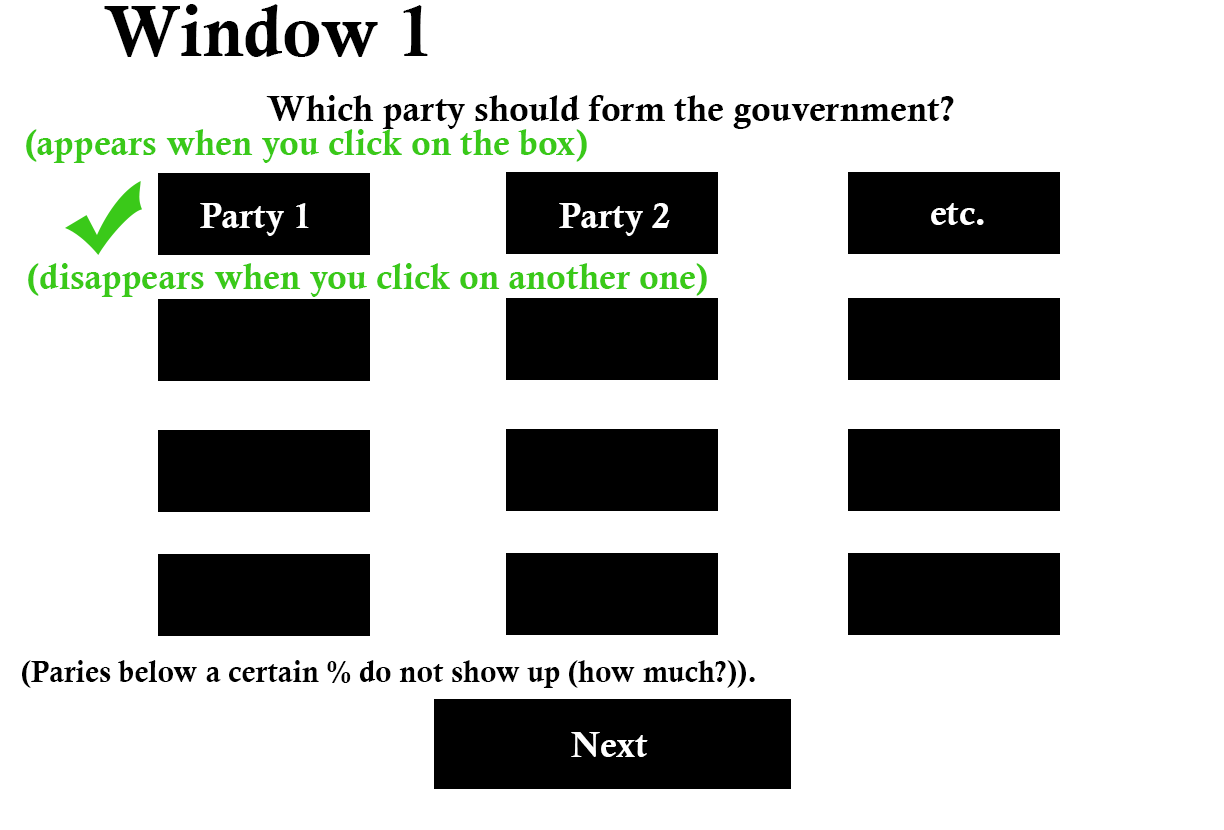
<style>
.page{position:relative;width:1224px;height:830px;background:#ffffff}
.page>*{position:absolute;margin:0}
.t1{font:72px "CalisMTBol";color:#000000}
.t2{font:36px "CalisMTBol";color:#000000}
.t3{font:36px "CalisMTBol";color:#3ac919}
.t4{font:36px "CalisMTBol";color:#ffffff}
.t5{font:30px "CalisMTBol";color:#000000}
</style>
<div class="page">
<p class="t1" style="left:104px;top:4px;width:324px;height:53px">Window 1</p>
<p class="t2" style="left:266px;top:95px;width:688px;height:34px">Which party should form the gouvernment?</p>
<p class="t3" style="left:26px;top:129px;width:561px;height:34px">(appears when you click on the box)</p>
<p class="t4" style="left:200px;top:203px;width:109px;height:33px">Party 1</p>
<p class="t4" style="left:559px;top:203px;width:111px;height:33px">Party 2</p>
<p class="t4" style="left:931px;top:203px;width:53px;height:22px">etc.</p>
<p class="t3" style="left:28px;top:263px;width:679px;height:34px">(disappears when you click on another one)</p>
<p class="t5" style="left:22px;top:660px;width:733px;height:28px">(Paries below a certain % do not show up (how much?)).</p>
<p class="t4" style="left:571px;top:732px;width:77px;height:25px">Next</p>
</div>
